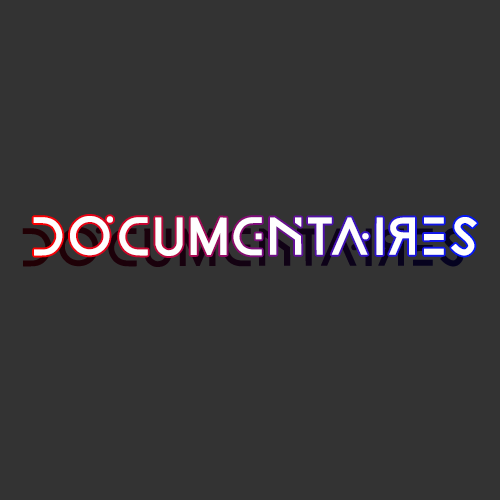
<style>
.page{position:relative;width:500px;height:500px;background:#333333}
.page>*{position:absolute;margin:0}
.t1{font:45.8px "FoundationLogo";letter-spacing:-0.25em;color:#fefefe;font-weight:bold}
</style>
<div class="page">
<p class="t1" style="left:33px;top:216px;width:444px;height:40px">DocumEntaires</p>
</div>
